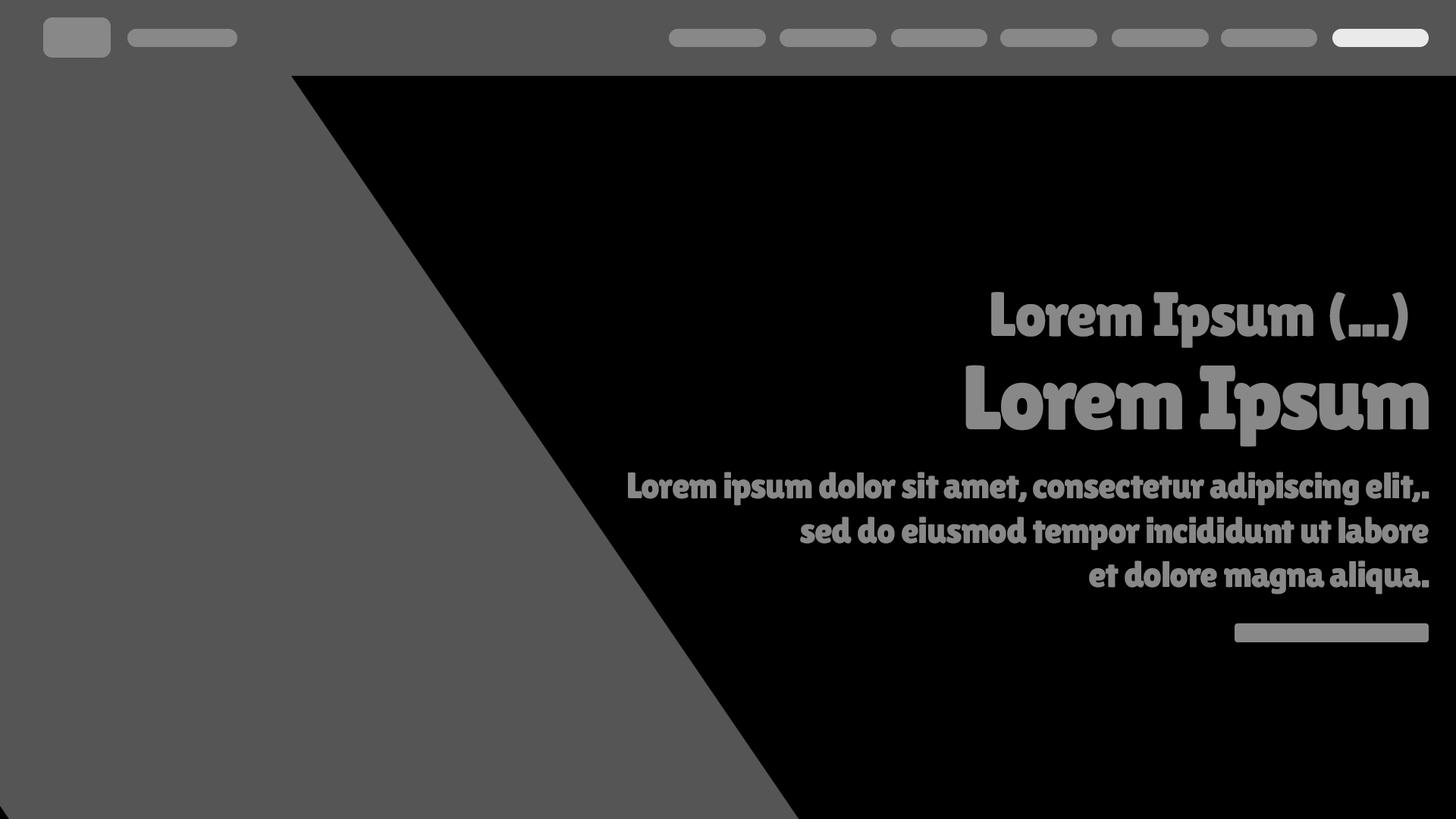
<style>
.page{position:relative;width:1456px;height:819px;background:#000000}
.page>*{position:absolute;margin:0}
.t1{font:62.5px "LilitaOne";letter-spacing:-0.025em;color:#888888}
.t2{font:90.9px "LilitaOne";letter-spacing:-0.025em;color:#888888}
.t3{font:36.8px "LilitaOne";letter-spacing:-0.025em;color:#888888}
</style>
<div class="page">
<p class="t1" style="left:991px;top:292px;width:417px;height:56px">Lorem Ipsum (...)</p>
<p class="t2" style="left:965px;top:365px;width:464px;height:82px">Lorem Ipsum</p>
<p class="t3" style="left:628px;top:472px;width:801px;height:123px;text-align:right">Lorem ipsum dolor sit amet, consectetur adipiscing elit,.<br>sed do eiusmod tempor incididunt ut labore<br>et dolore magna aliqua.</p>
</div>
